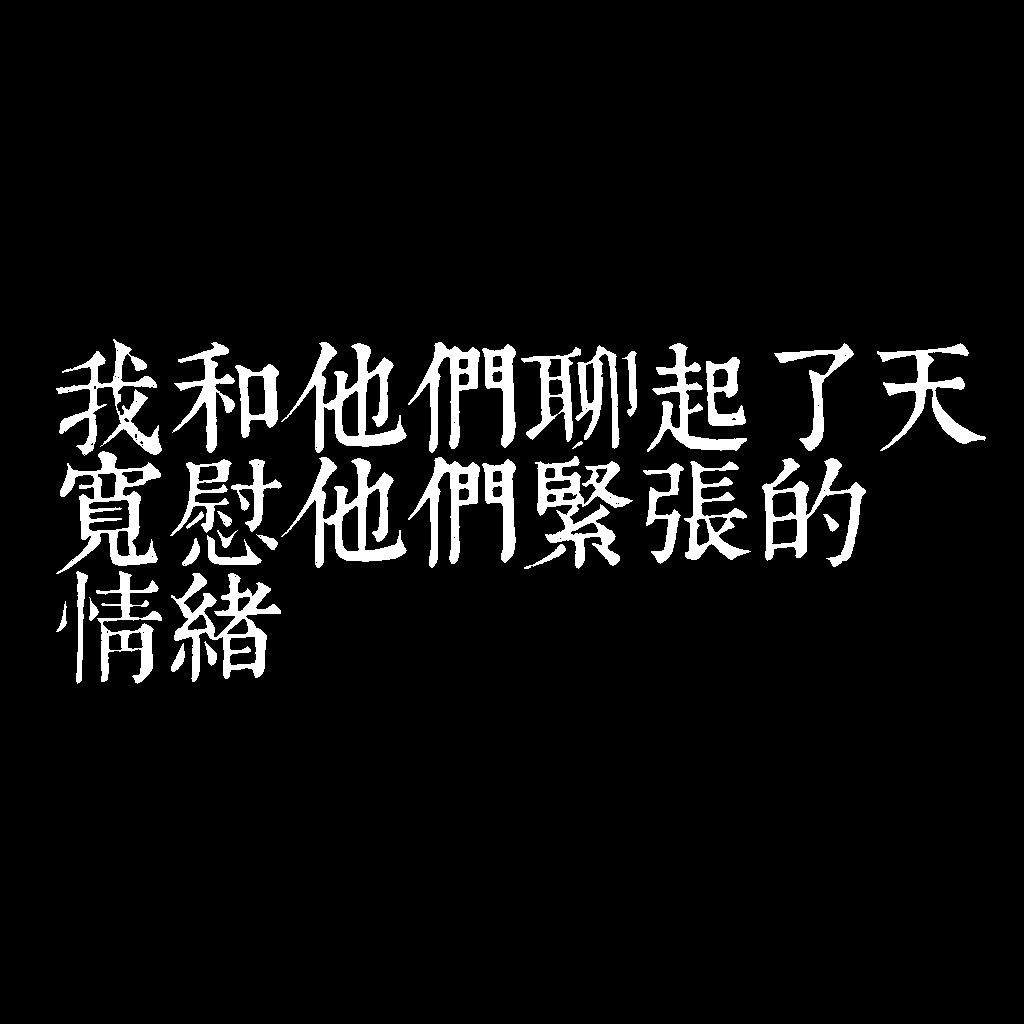
<style>
.page{position:relative;width:1024px;height:1024px;background:#000000}
.page>*{position:absolute;margin:0}
.t1{font:120px/115px "TpldKhangXiDictTrial";letter-spacing:-0.02em;color:#ffffff}
</style>
<div class="page">
<p class="t1" style="left:56px;top:339px;width:930px;height:345px">我和他們聊起了天<br>寬慰他們緊張的<br>情緒</p>
</div>
